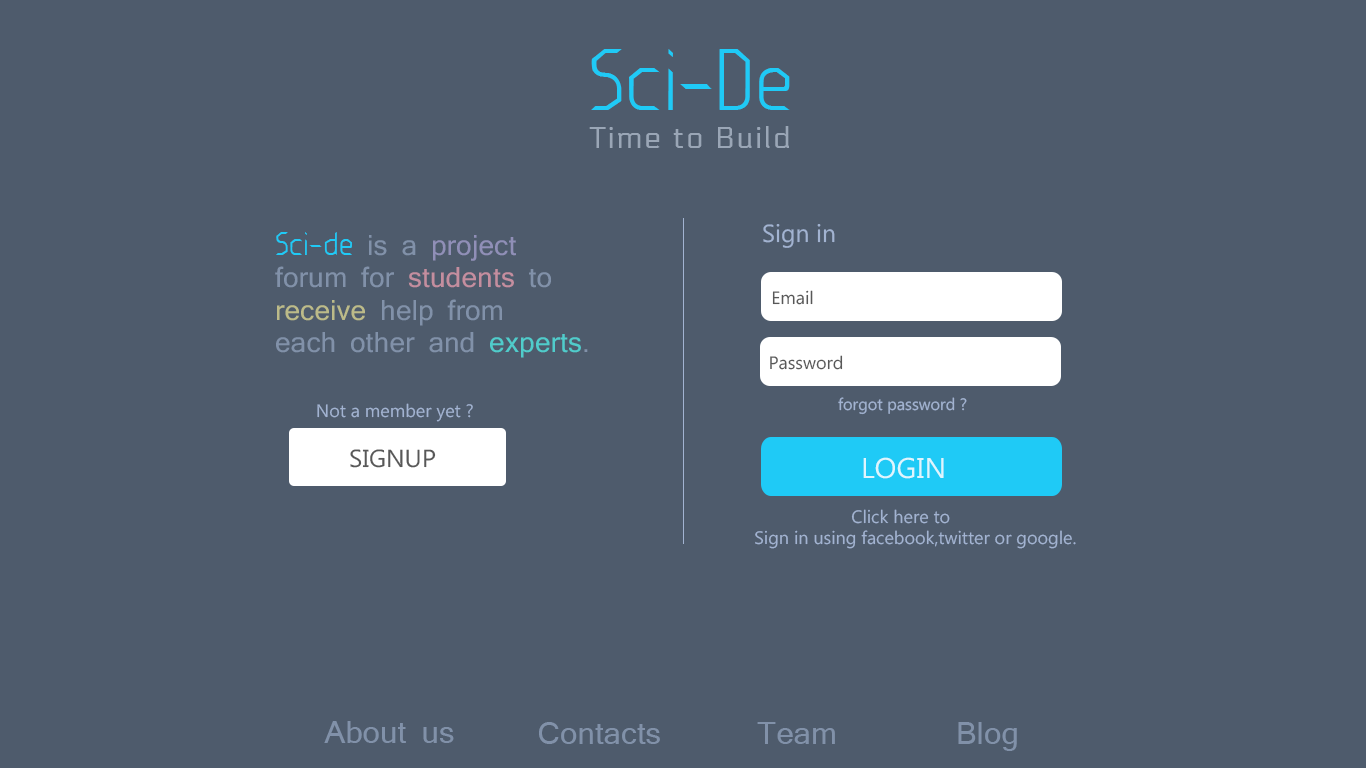
<style>
.page{position:relative;width:1366px;height:768px;background:#4e5b6c}
.page>*{position:absolute;margin:0}
.t1{font:72px "Eclectic";color:#1fcaf6}
.t2{font:30px "Electrolize-Regular";letter-spacing:0.075em;color:#9aa6b6}
.t3{font:27px "Mangal";letter-spacing:0.005em;color:#8191a9}
.t4{font:27px "Eclectic";letter-spacing:0.005em;color:#1fcaf6}
.t5{font:27px "Mangal";letter-spacing:0.005em;color:#908fb7}
.t6{font:27px "Mangal";letter-spacing:0.005em;color:#c48e9f}
.t7{font:27px "Mangal";letter-spacing:0.005em;color:#bcbb89}
.t8{font:27px "Mangal";letter-spacing:0.005em;color:#50cccb}
.t9{font:24.9px "MicrosoftPhagsPa";color:#a2b3d1}
.t10{font:18px "MicrosoftPhagsPa";color:#585858}
.t11{font:16.6px "MicrosoftPhagsPa";color:#a2b3d1}
.t12{font:18px "MicrosoftPhagsPa";color:#a2b3d1}
.t13{font:24.9px "MicrosoftPhagsPa";color:#585858}
.t14{font:28.6px "MicrosoftPhagsPa";color:#dff5fd}
.t15{font:30px "Mangal";letter-spacing:0.005em;color:#8191a9}
</style>
<div class="page">
<p class="t1" style="left:591px;top:49px;width:199px;height:61px">Sci-De</p>
<p class="t2" style="left:589px;top:126px;width:200px;height:22px">Time to Build</p>
<p class="t3" style="left:275px;top:232px;width:313px;height:126px"><span class="t4">Sci-de</span> is a <span class="t5">project</span> <br>forum for <span class="t6">students</span> to<br><span class="t7">receive</span> help from <br>each other and <span class="t8">experts</span>.</p>
<p class="t9" style="left:763px;top:224px;width:72px;height:24px">Sign in</p>
<p class="t10" style="left:772px;top:290px;width:41px;height:15px">Email</p>
<p class="t10" style="left:770px;top:355px;width:73px;height:15px">Password</p>
<p class="t11" style="left:838px;top:397px;width:129px;height:18px">forgot password ?</p>
<p class="t12" style="left:317px;top:403px;width:156px;height:19px">Not a member yet ?</p>
<p class="t13" style="left:350px;top:449px;width:86px;height:19px">SIGNUP</p>
<p class="t14" style="left:863px;top:457px;width:81px;height:22px">LOGIN</p>
<p class="t12" style="left:851px;top:509px;width:99px;height:15px">Click here to</p>
<p class="t12" style="left:755px;top:530px;width:321px;height:19px">Sign in using facebook,twitter or google.</p>
<p class="t15" style="left:324px;top:721px;width:130px;height:22px">About us</p>
<p class="t15" style="left:539px;top:722px;width:121px;height:22px">Contacts</p>
<p class="t15" style="left:757px;top:722px;width:78px;height:22px">Team</p>
<p class="t15" style="left:958px;top:722px;width:59px;height:29px">Blog</p>
</div>
